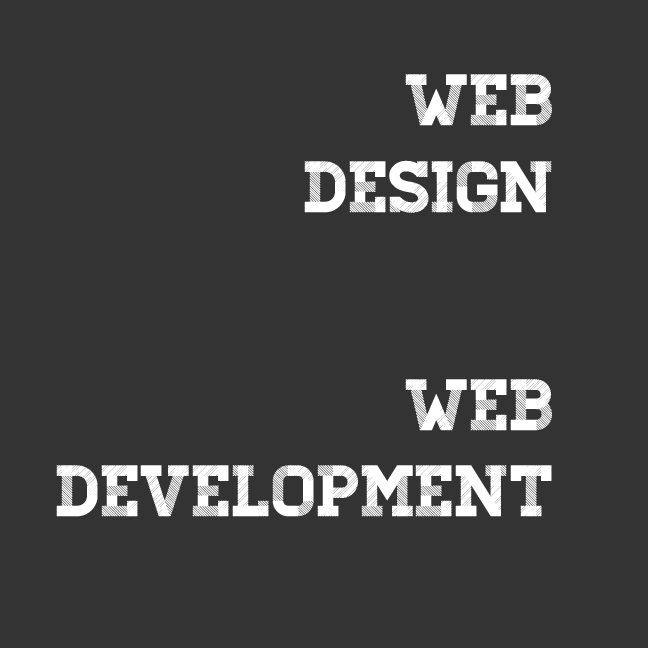
<style>
.page{position:relative;width:648px;height:648px;background:#333333}
.page>*{position:absolute;margin:0}
.t1{font:72px "Homestead-Display";color:#ffffff}
</style>
<div class="page">
<p class="t1" style="left:304px;top:74px;width:248px;height:139px;text-align:right">Web<br>Design</p>
<p class="t1" style="left:56px;top:379px;width:496px;height:138px;text-align:right">Web<br>Development</p>
</div>
